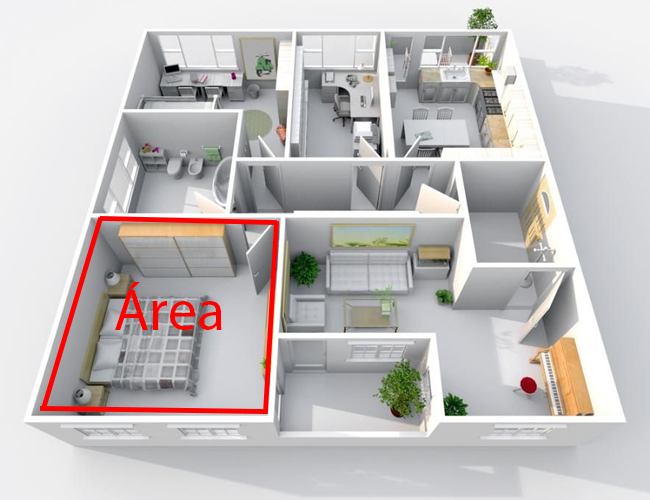
<style>
.page{position:relative;width:650px;height:500px}
.page>*{position:absolute;margin:0}
.t1{font:58.4px "MyriadPro-Regular";color:#ff0000}
</style>
<div class="page">
<p class="t1" style="left:115px;top:282px;width:107px;height:48px">Área</p>
</div>
